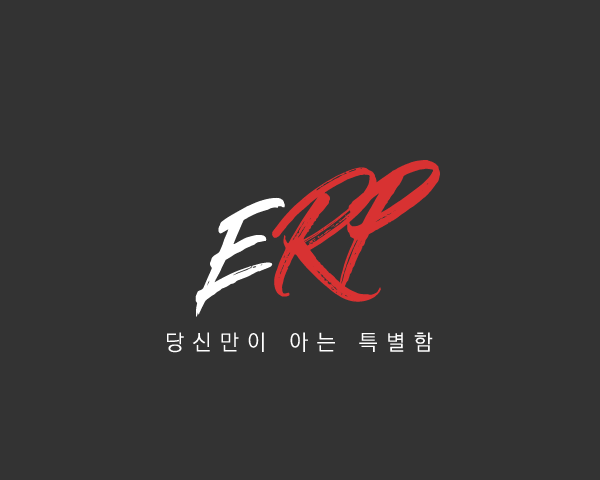
<style>
.page{position:relative;width:600px;height:480px;background:#333333}
.page>*{position:absolute;margin:0}
.t1{font:106.7px "GlossAndBloom";color:#d83232;font-style:italic}
.t2{font:92.1px "GlossAndBloom";color:#ffffff;font-style:italic;scale:0.96 1}
.t3{font:21.5px "KoPubWorldDotumLight";letter-spacing:0.4em;color:#ffffff}
.t4{font:21.5px "GlossAndBloom";letter-spacing:0.4em;color:#d83232}
</style>
<div class="page">
<p class="t1" style="left:272px;top:160px;width:168px;height:142px;rotate:-9deg">RP</p>
<p class="t2" style="left:195px;top:197px;width:90px;height:120px;rotate:-9deg">E</p>
<p class="t3" style="left:167px;top:332px;width:266px;height:21px"><span class="t4"><br></span>당신만이 아는 특별함</p>
</div>
